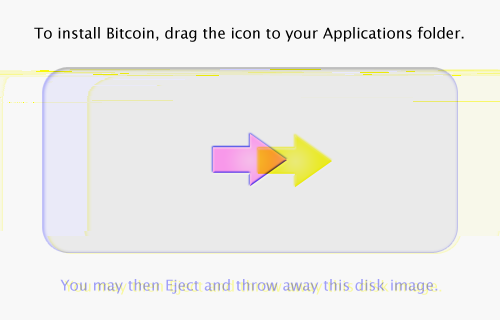
<style>
.page{position:relative;width:500px;height:320px;background:#f8f8f8}
.page>*{position:absolute;margin:0}
.t1{font:15px "LucidaGrande";color:#000000}
.t2{font:15px "LucidaGrande"}
</style>
<div class="page">
<p class="t1" style="left:34px;top:26px;width:430px;height:16px">To install Bitcoin, drag the icon to your Applications folder.</p>
<p class="t2" style="left:60px;top:279px;width:378px;height:15px">You may then Eject and throw away this disk image.</p>
</div>
